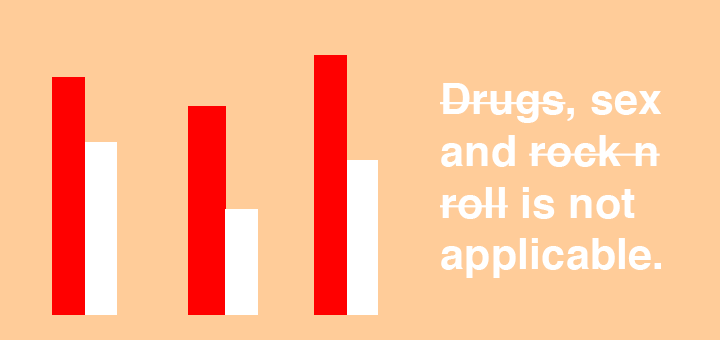
<style>
.page{position:relative;width:720px;height:340px;background:#ffcc99}
.page>*{position:absolute;margin:0}
.t1{font:43px "Helvetica-Bold";letter-spacing:0.005em;color:#ffffff}
</style>
<div class="page">
<p class="t1" style="left:440px;top:83px;width:221px;height:195px">Drugs, sex and rock n roll is not applicable.</p>
</div>
